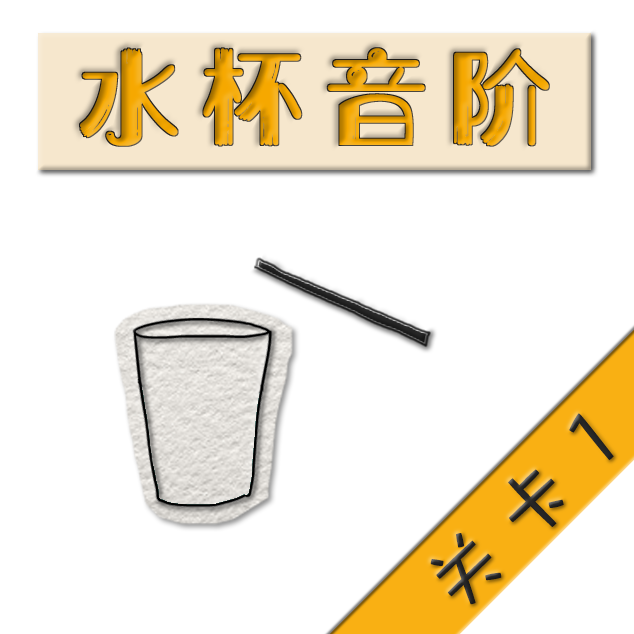
<style>
.page{position:relative;width:634px;height:634px;background:#ffffff}
.page>*{position:absolute;margin:0}
.t1{font:103px "HYXingQiuTiJ";letter-spacing:0.2em}
.t2{font:82px "DFWaWaSC-W5";letter-spacing:0.2em;color:#282828}
</style>
<div class="page">
<p class="t1" style="left:80px;top:48px;width:469px;height:98px">水杯音阶</p>
<p class="t2" style="left:430px;top:413px;width:184px;height:192px;rotate:-45deg">关卡1</p>
</div>
